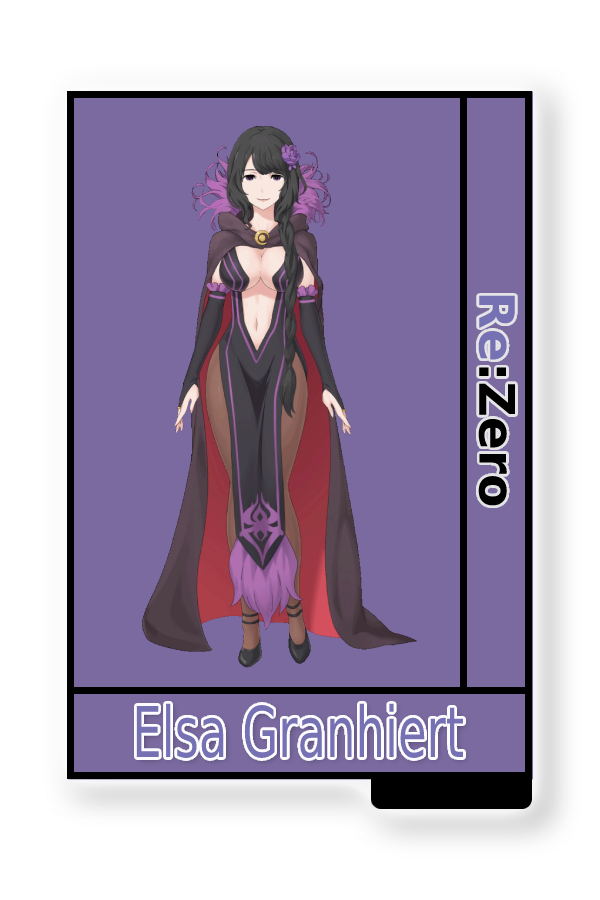
<style>
.page{position:relative;width:600px;height:900px;background:#7a6aa0}
.page>*{position:absolute;margin:0}
.t1{font:48.8px "MADETOMMY-Bold";color:#000000}
.t2{font:48.8px "MADETOMMY-Bold";color:#7671b3}
.t3{font:70.1px "CoolveticaRg-Regular";color:#7671b3;scale:0.66 1}
</style>
<div class="page">
<p class="t1" style="left:478px;top:295px;width:37px;height:211px;rotate:90deg"><span class="t2">Re</span>:Zero</p>
<p class="t3" style="left:136px;top:703px;width:327px;height:55px">Elsa Granhiert</p>
</div>
